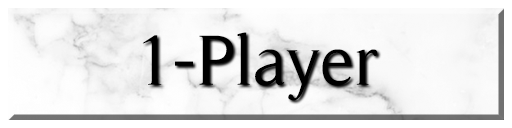
<style>
.page{position:relative;width:512px;height:128px}
.page>*{position:absolute;margin:0}
.t1{font:72px "Timeless-Normal";color:#000000}
</style>
<div class="page">
<p class="t1" style="left:142px;top:32px;width:236px;height:69px">1-Player</p>
</div>
